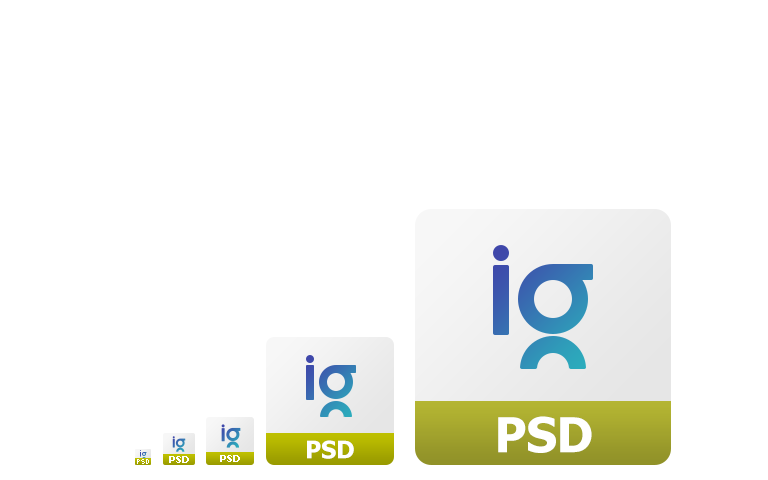
<style>
.page{position:relative;width:768px;height:480px;background:#ffffff}
.page>*{position:absolute;margin:0}
.t1{font:48px "Tahoma-Bold";color:#ffffff}
.t2{font:24px "Tahoma-Bold";color:#ffffff}
.t3{font:10px "Tahoma-Bold";color:#ffffff}
</style>
<div class="page">
<p class="t1" style="left:498px;top:416px;width:94px;height:37px">PSD</p>
<p class="t2" style="left:307px;top:440px;width:47px;height:19px">PSD</p>
<p class="t3" style="left:169px;top:456px;width:20px;height:7px">PSD</p>
<p class="t3" style="left:220px;top:455px;width:20px;height:7px">PSD</p>
</div>
